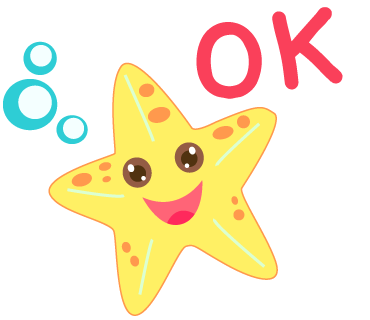
<style>
.page{position:relative;width:370px;height:320px;background:#ffffff}
.page>*{position:absolute;margin:0}
.t1{font:218px "2005_iannnnnMTV";letter-spacing:0.025em;color:#fa405a;scale:1.06 1}
</style>
<div class="page">
<p class="t1" style="left:196px;top:7px;width:147px;height:92px;rotate:-9deg">OK</p>
</div>
